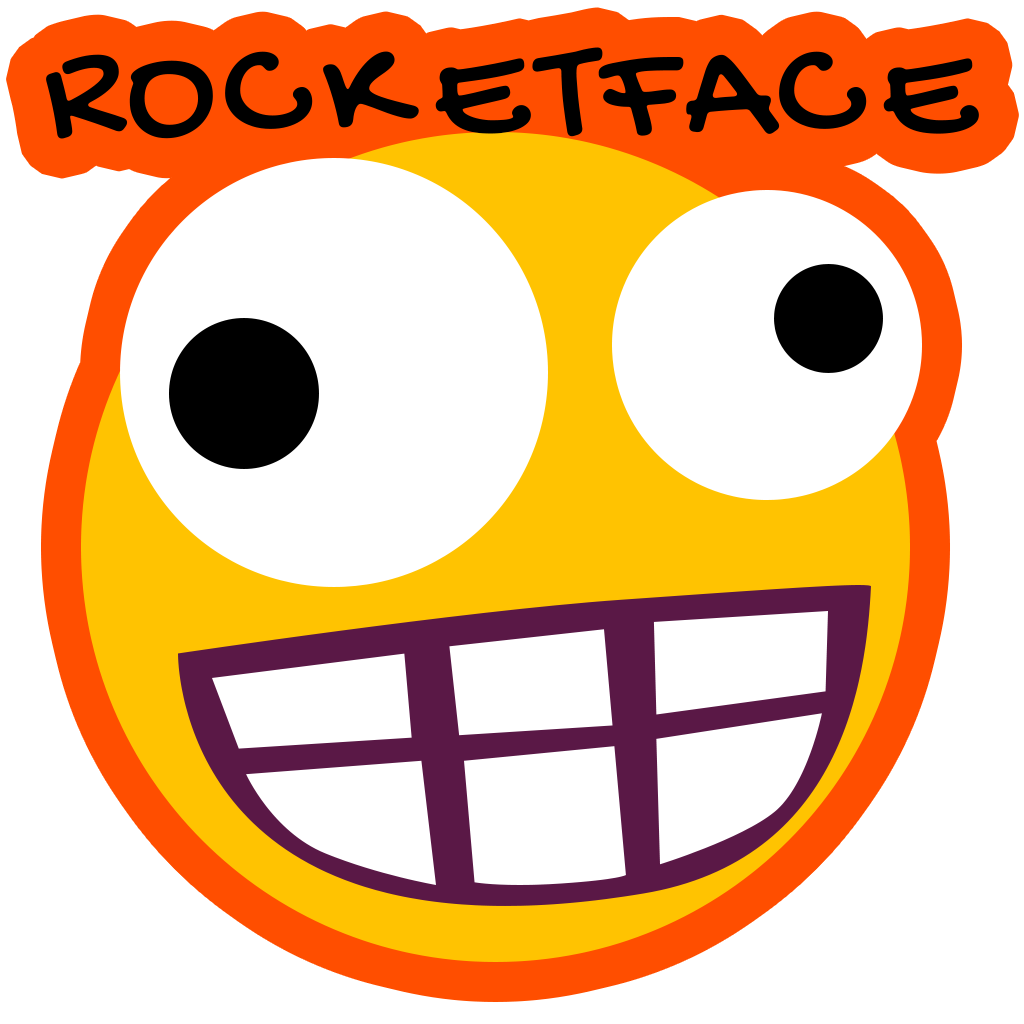
<style>
.page{position:relative;width:1024px;height:1024px;background:#ffffff}
.page>*{position:absolute;margin:0}
.t1{font:150.4px "GochiHandCyrillic";color:#000000}
</style>
<div class="page">
<p class="t1" style="left:46px;top:47px;width:933px;height:92px">ROCKETFACE</p>
</div>
